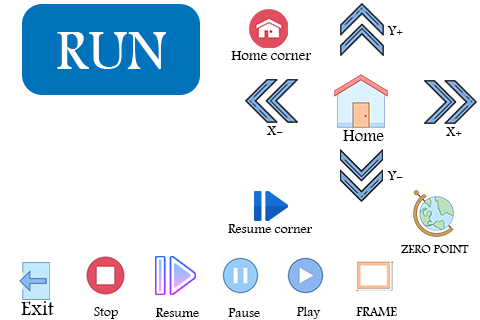
<style>
.page{position:relative;width:480px;height:320px;background:#ffffff}
.page>*{position:absolute;margin:0}
.t1{font:14.8px "Arash";color:#000000}
.t2{font:58.2px "Arash";color:#ffffff}
.t3{font:16.9px "Arash";color:#000000}
.t4{font:13.8px "Arash";color:#000000}
.t5{font:12.7px "Arash";color:#000000}
.t6{font:21.2px "Arash";color:#000000}
</style>
<div class="page">
<p class="t1" style="left:387px;top:26px;width:16px;height:9px">+Y</p>
<p class="t2" style="left:57px;top:32px;width:109px;height:38px">RUN</p>
<p class="t1" style="left:231px;top:51px;width:81px;height:9px">Home corner</p>
<p class="t1" style="left:267px;top:126px;width:16px;height:9px">-X</p>
<p class="t3" style="left:343px;top:130px;width:41px;height:11px">Home</p>
<p class="t1" style="left:446px;top:127px;width:16px;height:9px">+X</p>
<p class="t1" style="left:387px;top:171px;width:16px;height:9px">-Y</p>
<p class="t4" style="left:228px;top:224px;width:84px;height:9px">Resume corner</p>
<p class="t5" style="left:401px;top:245px;width:68px;height:8px">ZERO POINT</p>
<p class="t6" style="left:21px;top:301px;width:33px;height:14px">Exit</p>
<p class="t4" style="left:94px;top:307px;width:24px;height:12px">Stop</p>
<p class="t4" style="left:156px;top:308px;width:43px;height:9px">Resume</p>
<p class="t4" style="left:228px;top:308px;width:32px;height:9px">Pause</p>
<p class="t4" style="left:297px;top:307px;width:24px;height:12px">Play</p>
<p class="t4" style="left:356px;top:307px;width:41px;height:9px">FRAME</p>
</div>
